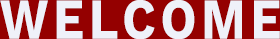
<style>
.page{position:relative;width:280px;height:39px;background:#940000}
.page>*{position:absolute;margin:0}
.t1{font:58px "WorkSansRoman-Bold";letter-spacing:0.1em;color:#eff1f9;scale:0.84 1}
</style>
<div class="page">
<p class="t1" style="left:0px;top:0px;width:280px;height:40px">WELCOME</p>
</div>
